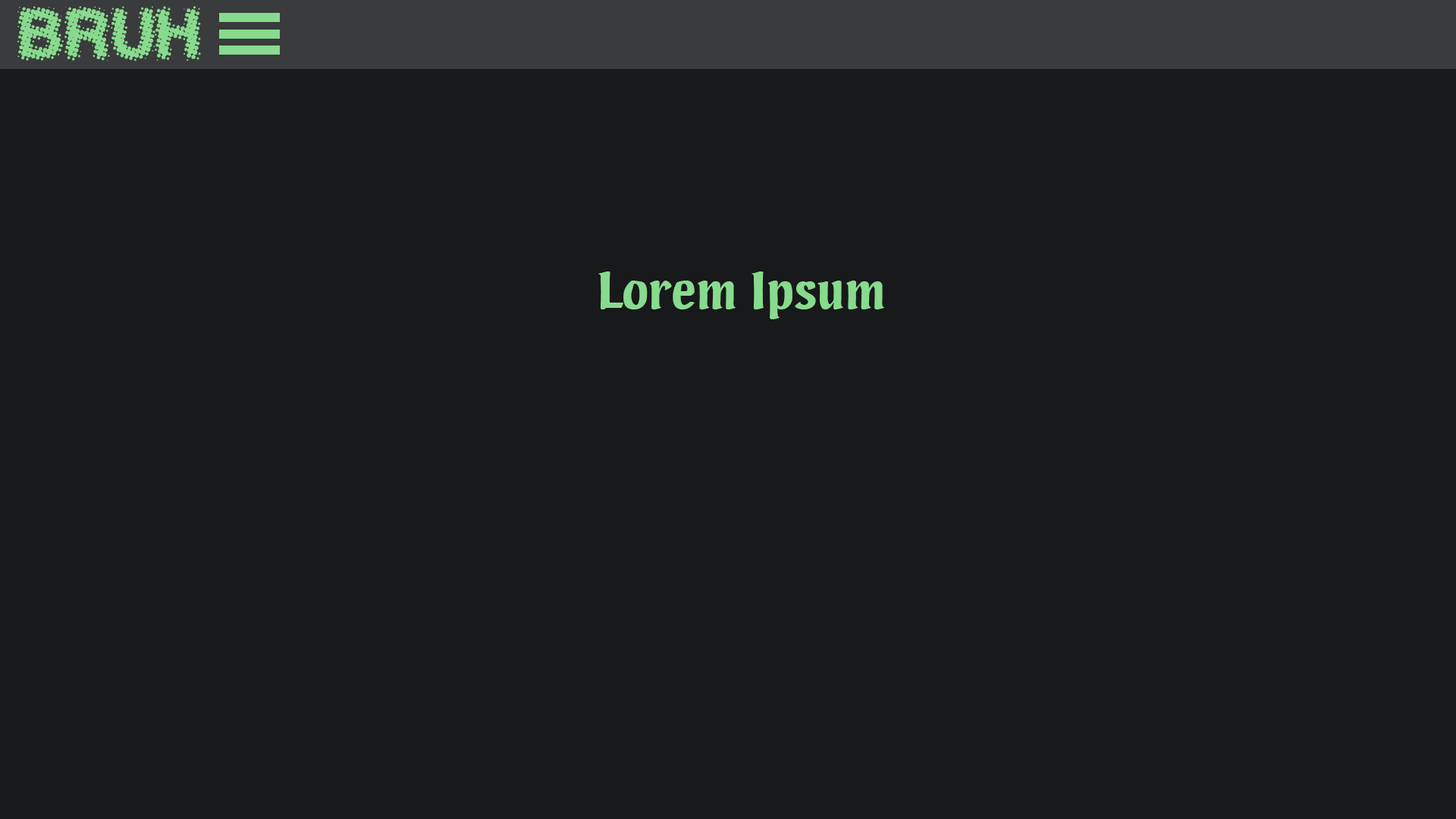
<style>
.page{position:relative;width:1456px;height:819px;background:#18191a}
.page>*{position:absolute;margin:0}
.t1{font:54.6px "AntFarmGoneCamping-hun";color:#88db8e}
.t2{font:54.6px "AdHoc";color:#88db8e}
</style>
<div class="page">
<p class="t1" style="left:17px;top:6px;width:184px;height:55px">Bruh</p>
<p class="t2" style="left:598px;top:271px;width:286px;height:48px">Lorem Ipsum</p>
</div>
